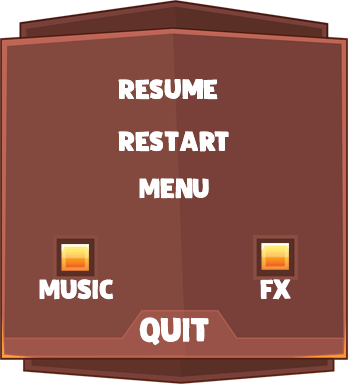
<style>
.page{position:relative;width:348px;height:384px;background:#84493e}
.page>*{position:absolute;margin:0}
.t1{font:27.8px "DKZealand-Regular";color:#fefefe}
.t2{font:34.7px "DKZealand-Regular";color:#fefefe}
</style>
<div class="page">
<p class="t1" style="left:118px;top:79px;width:100px;height:21px">Resume</p>
<p class="t1" style="left:118px;top:131px;width:111px;height:21px">Restart</p>
<p class="t1" style="left:139px;top:178px;width:70px;height:21px">MENU</p>
<p class="t1" style="left:39px;top:279px;width:74px;height:21px">MUSIC</p>
<p class="t1" style="left:260px;top:279px;width:31px;height:21px">FX</p>
<p class="t2" style="left:139px;top:317px;width:70px;height:28px">QUIT</p>
</div>
